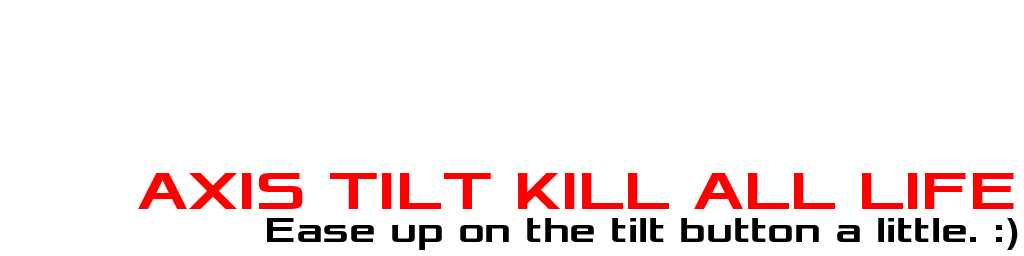
<style>
.page{position:relative;width:1024px;height:256px;background:#ffffff}
.page>*{position:absolute;margin:0}
.t1{font:55px "Xolonium-Bold";color:#ff0000}
.t2{font:36px "Xolonium-Bold";color:#000000}
</style>
<div class="page">
<p class="t1" style="left:138px;top:173px;width:876px;height:36px">AXIS TILT KILL ALL LIFE</p>
<p class="t2" style="left:267px;top:218px;width:751px;height:32px">Ease up on the tilt button a little. :)</p>
</div>
